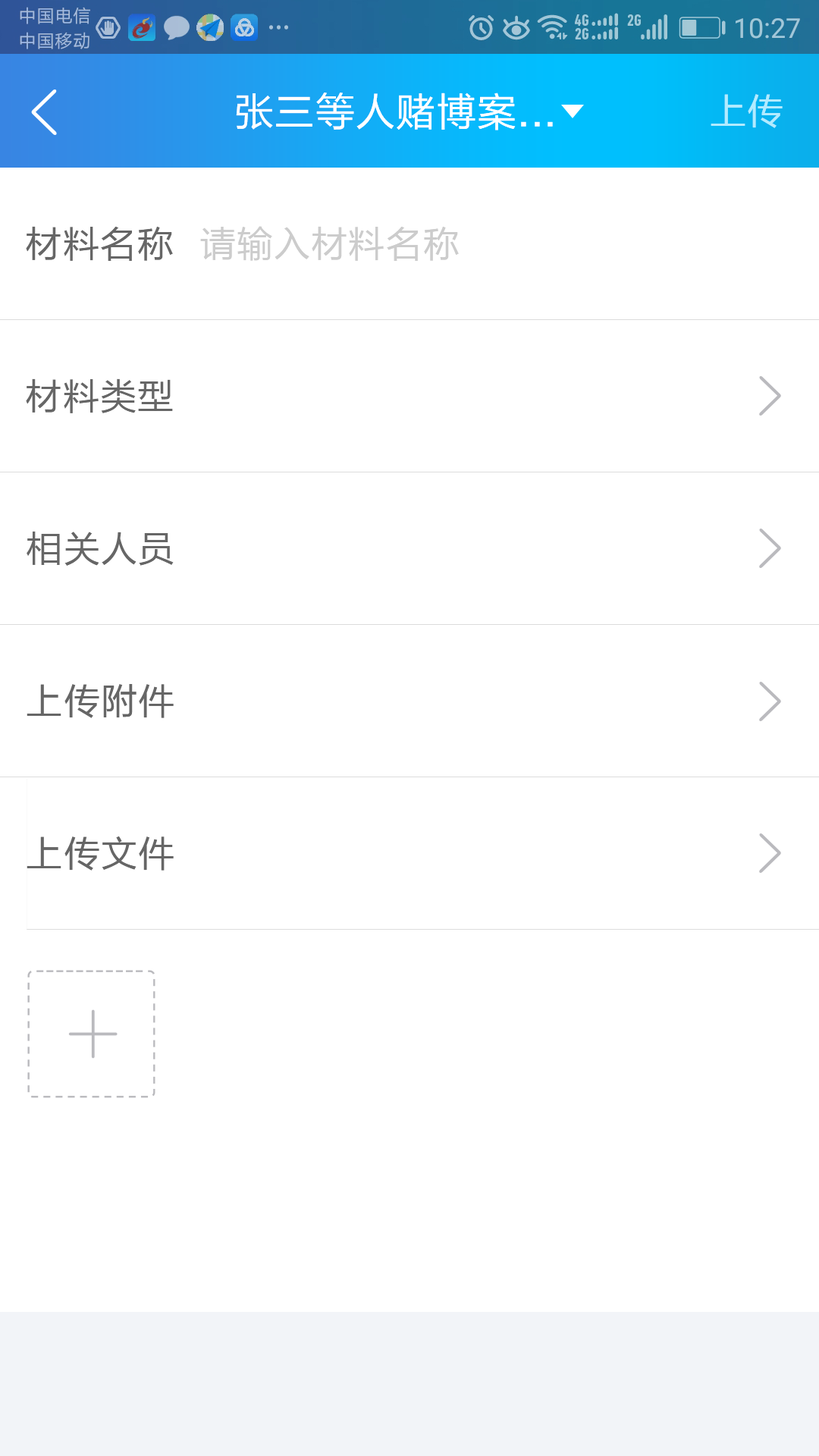
<style>
.page{position:relative;width:819px;height:1456px;background:#ffffff}
.page>*{position:absolute;margin:0}
.t1{font:39.4px "FZLTHK--GBK1-0";letter-spacing:0.025em;color:#ffffff}
.t2{font:36.4px "FZLTHK--GBK1-0";letter-spacing:0.025em;color:#b2ebff}
.t3{font:36.4px "FZLTHK--GBK1-0";letter-spacing:0.025em;color:#666666}
.t4{font:36.4px "FZLTHK--GBK1-0";letter-spacing:0.025em;color:#cccccc}
</style>
<div class="page">
<p class="t1" style="left:236px;top:93px;width:317px;height:37px">张三等人赌博案...</p>
<p class="t2" style="left:711px;top:94px;width:72px;height:34px">上传</p>
<p class="t3" style="left:26px;top:226px;width:147px;height:35px">材料名称</p>
<p class="t4" style="left:200px;top:226px;width:259px;height:35px">请输入材料名称</p>
<p class="t3" style="left:26px;top:378px;width:147px;height:35px">材料类型</p>
<p class="t3" style="left:27px;top:531px;width:147px;height:35px">相关人员</p>
<p class="t3" style="left:27px;top:684px;width:147px;height:34px">上传附件</p>
<p class="t3" style="left:27px;top:836px;width:147px;height:35px">上传文件</p>
</div>
